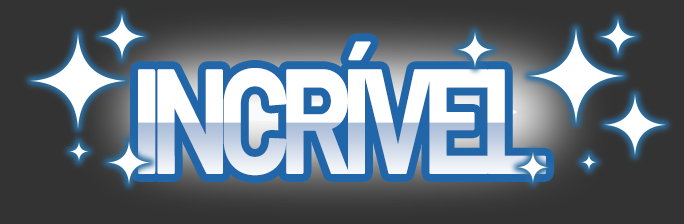
<style>
.page{position:relative;width:684px;height:224px;background:#333333}
.page>*{position:absolute;margin:0}
.t1{font:149.4px "Barlow-Bold";letter-spacing:-0.1em;color:#ffffff;scale:0.8 1}
</style>
<div class="page">
<p class="t1" style="left:138px;top:41px;width:408px;height:135px">INCRÍVEL</p>
</div>
